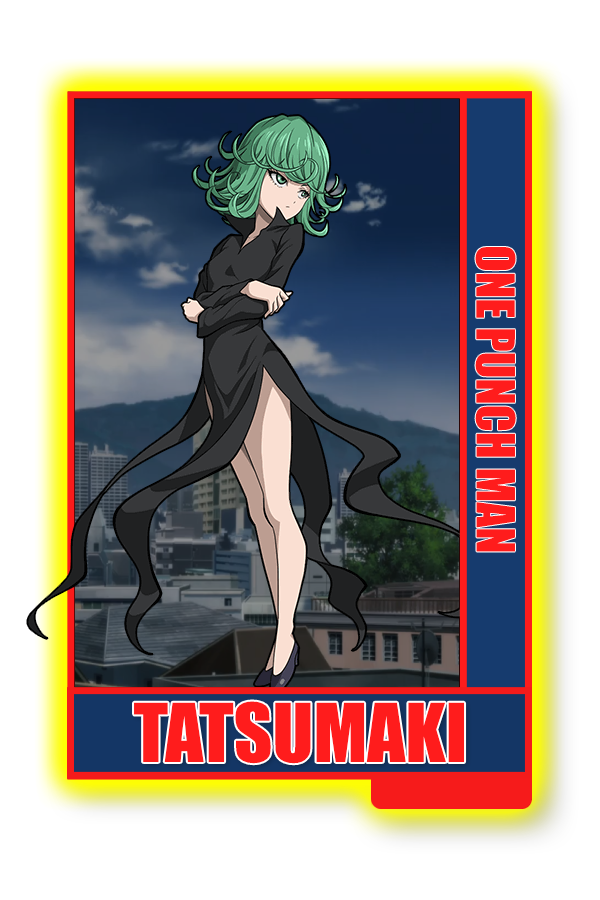
<style>
.page{position:relative;width:600px;height:900px;background:#ffffff}
.page>*{position:absolute;margin:0}
.t1{font:48.8px "Impact";color:#ff1c1c}
.t2{font:75px "Impact";color:#ff1c1c}
</style>
<div class="page">
<p class="t1" style="left:475px;top:246px;width:41px;height:306px;rotate:90deg">ONE PUNCH MAN</p>
<p class="t2" style="left:134px;top:701px;width:331px;height:63px">TATSUMAKI</p>
</div>
